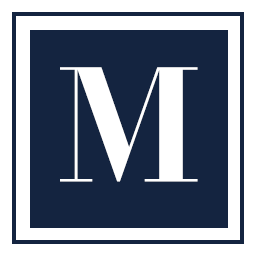
<style>
.page{position:relative;width:256px;height:256px;background:#142440}
.page>*{position:absolute;margin:0}
.t1{font:160px "Didot-Bold";color:#ffffff}
</style>
<div class="page">
<p class="t1" style="left:60px;top:67px;width:138px;height:115px">M</p>
</div>
